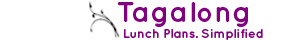
<style>
.page{position:relative;width:300px;height:40px;background:#ffffff}
.page>*{position:absolute;margin:0}
.t1{font:29.2px "QuicksandBold-Regular";color:#81017e}
.t2{font:12.5px "QuicksandBold-Regular";color:#81017e}
</style>
<div class="page">
<p class="t1" style="left:117px;top:2px;width:131px;height:25px">Tagalong</p>
<p class="t2" style="left:124px;top:29px;width:139px;height:11px">Lunch Plans. Simplified</p>
</div>
